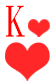
<style>
.page{position:relative;width:55px;height:83px;background:#ffffff}
.page>*{position:absolute;margin:0}
.t1{font:42px "DFKaiShu-SB-Estd-BF";color:#ff0000}
</style>
<div class="page">
<p class="t1" style="left:6px;top:5px;width:19px;height:32px">K</p>
</div>
